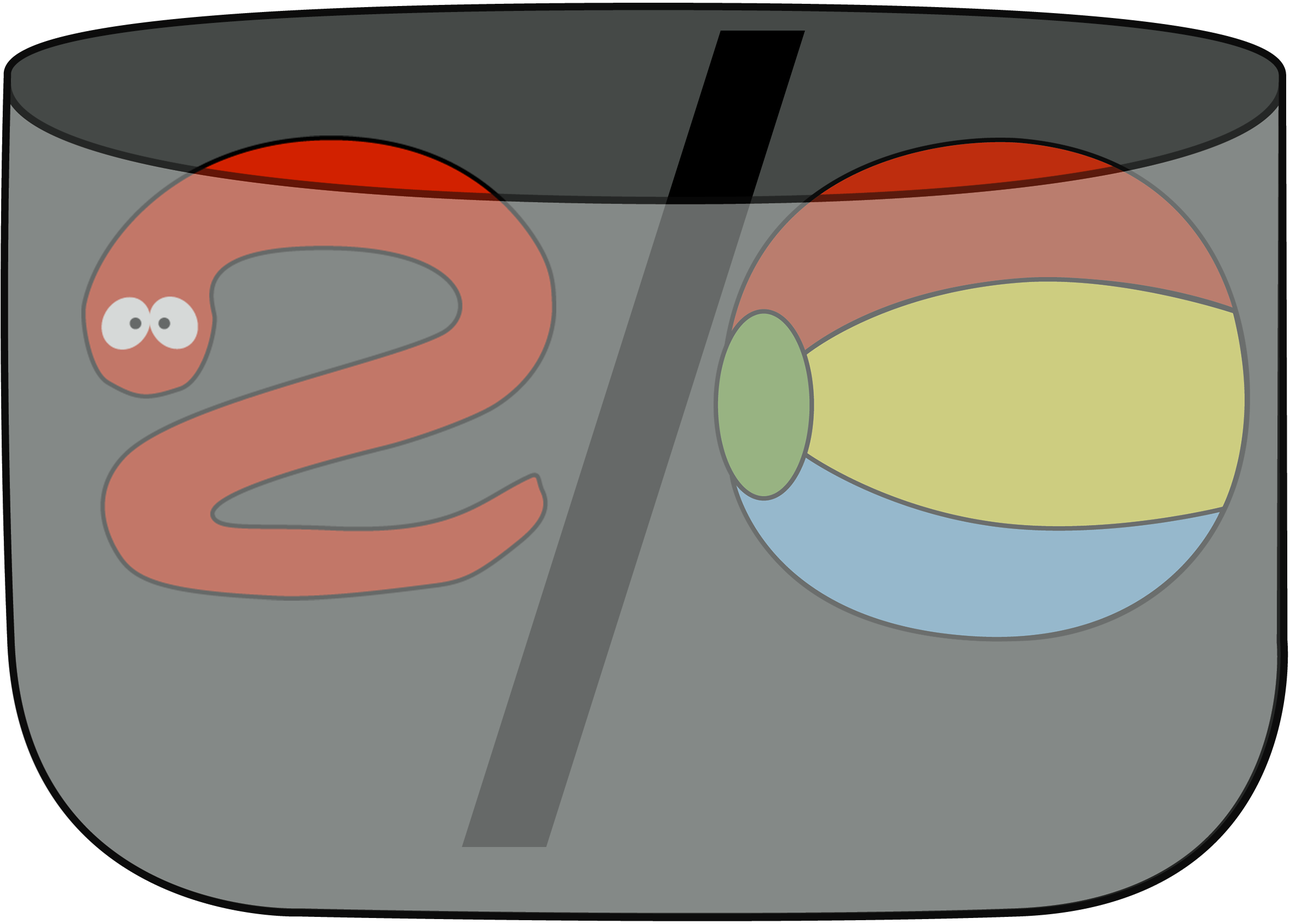
<style>
.page{position:relative;width:1290px;height:924px;background:#848987}
.page>*{position:absolute;margin:0}
.t1{font:1137.7px "Helvetica";color:#666968}
</style>
<div class="page">
<p class="t1" style="left:462px;top:31px;width:344px;height:816px">/</p>
</div>
